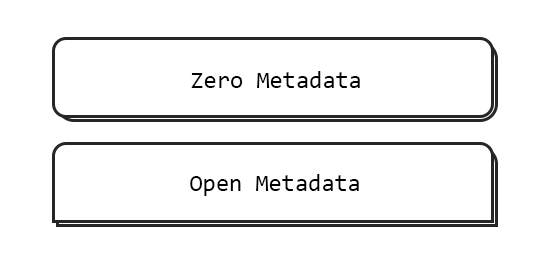
<style>
.page{position:relative;width:550px;height:260px;background:#ffffff}
.page>*{position:absolute;margin:0}
.t1{font:24px "Consolas";color:#010101}
</style>
<div class="page">
<p class="t1" style="left:191px;top:71px;width:169px;height:17px">Zero Metadata</p>
<p class="t1" style="left:190px;top:174px;width:169px;height:22px">Open Metadata</p>
</div>
